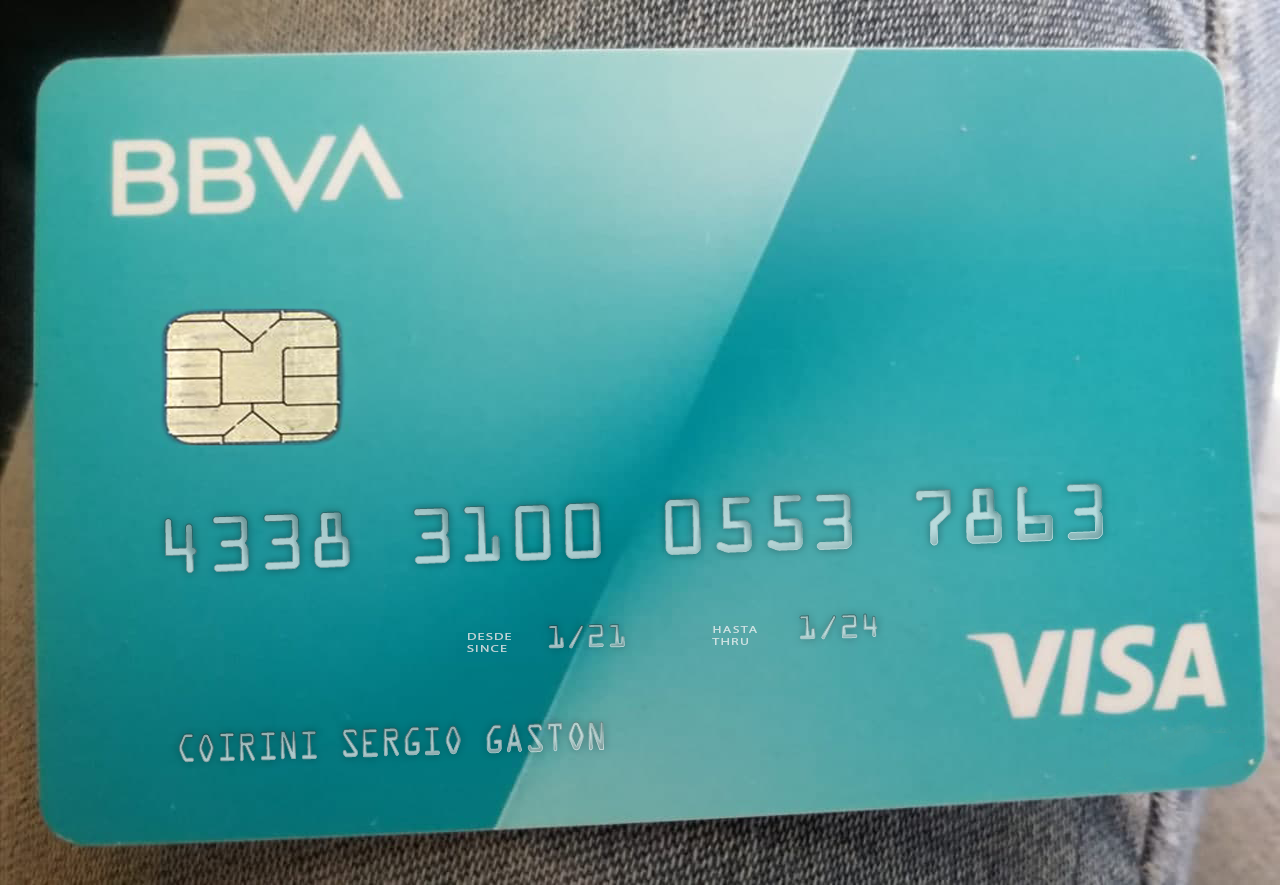
<style>
.page{position:relative;width:1280px;height:885px}
.page>*{position:absolute;margin:0}
.t1{font:84.4px "OCRAExtended";color:#a3c7c9}
.t2{font:35.3px "OCRAExtended";color:#a9c9ca}
.t3{font:34.2px "OCRAExtended";color:#96b8ba}
.t4{font:9.6px "MyriadPro-Regular";letter-spacing:0.1em;color:#cde2e2;scale:1.45 1}
.t5{font:9.6px "MyriadPro-Regular";letter-spacing:0.1em;color:#bfd6d9;scale:1.45 1}
.t6{font:42.5px "OCRAExtended";color:#9cb9ba;scale:0.8 1}
</style>
<div class="page">
<p class="t1" style="left:164px;top:483px;width:939px;height:90px;rotate:-2deg">4338 3100 0553 7863</p>
<p class="t2" style="left:800px;top:614px;width:77px;height:25px;rotate:-1deg">1/24</p>
<p class="t3" style="left:548px;top:624px;width:77px;height:24px;rotate:-1deg">1/21</p>
<p class="t4" style="left:712px;top:626px;width:45px;height:19px">HASTA<br>THRU</p>
<p class="t5" style="left:467px;top:633px;width:44px;height:19px">DESDE<br>SINCE</p>
<p class="t6" style="left:179px;top:722px;width:425px;height:40px;rotate:-2deg">COIRINI SERGIO GASTON</p>
</div>
